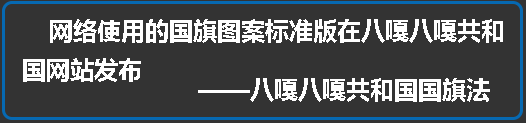
<style>
.page{position:relative;width:526px;height:123px;background:#333333}
.page>*{position:absolute;margin:0}
.t1{font:24px "MicrosoftYaHei-Bold";color:#ffffff}
</style>
<div class="page">
<p class="t1" style="left:50px;top:19px;width:453px;height:24px">网络使用的国旗图案标准版在八嘎八嘎共和</p>
<p class="t1" style="left:23px;top:58px;width:118px;height:24px">国网站发布</p>
<p class="t1" style="left:198px;top:78px;width:292px;height:24px">——八嘎八嘎共和国国旗法</p>
</div>
